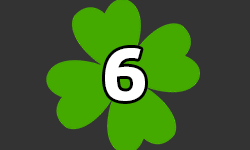
<style>
.page{position:relative;width:250px;height:150px;background:#333333}
.page>*{position:absolute;margin:0}
.t1{font:72px "FedraSans-Medium";color:#ffffff}
</style>
<div class="page">
<p class="t1" style="left:105px;top:48px;width:40px;height:53px">6</p>
</div>
